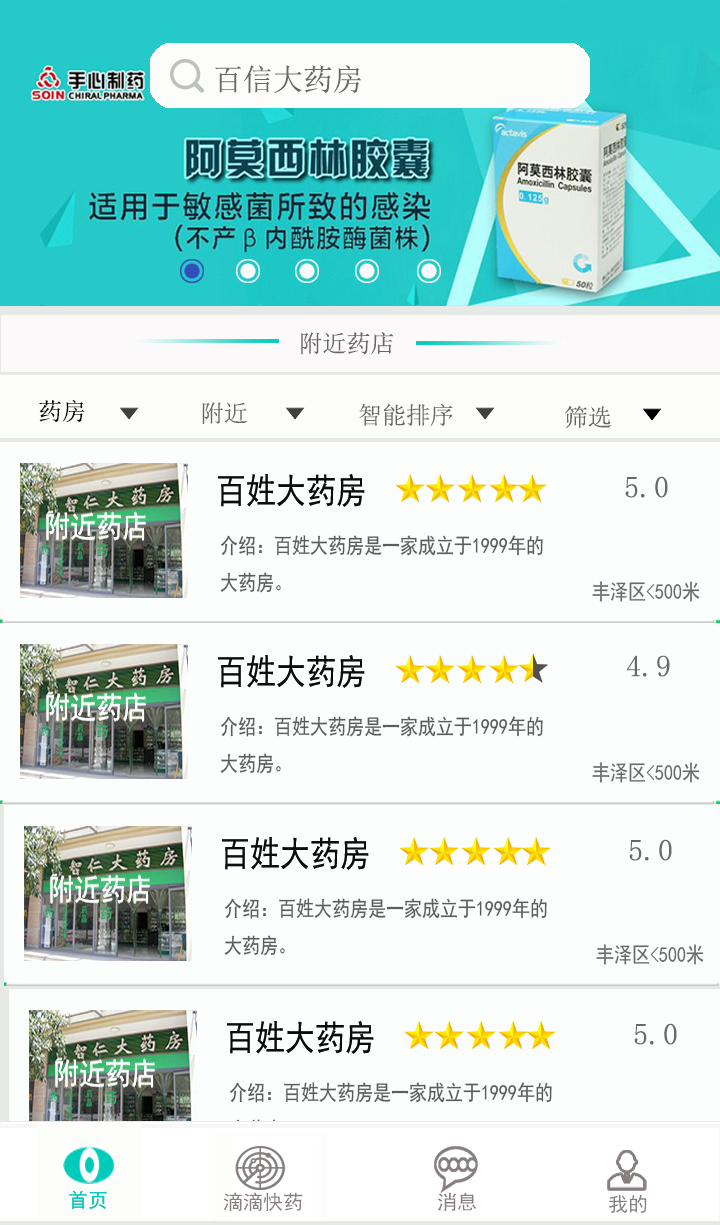
<style>
.page{position:relative;width:720px;height:1225px;background:#fbfefc}
.page>*{position:absolute;margin:0}
.t1{font:30px "SimSun";color:#686868}
.t2{font:24px "SimSun";color:#676666}
.t3{font:24px "SimSun";color:#050505}
.t4{font:24px "SimSun";color:#686867}
.t5{font:35.3px "SimHei";color:#0c0c0c;scale:0.85 1}
.t6{font:30px "SimSun";color:#686968}
.t7{font:21.2px "SimHei";color:#5b5c5c;scale:0.85 1}
.t8{font:21.2px "SimHei";color:#696b6a;scale:0.85 1}
</style>
<div class="page">
<p class="t1" style="left:215px;top:65px;width:146px;height:29px">百信大药房</p>
<p class="t2" style="left:301px;top:332px;width:93px;height:23px">附近药店</p>
<p class="t3" style="left:39px;top:399px;width:46px;height:24px">药房</p>
<p class="t4" style="left:202px;top:402px;width:46px;height:23px">附近</p>
<p class="t4" style="left:359px;top:403px;width:94px;height:23px">智能排序</p>
<p class="t4" style="left:565px;top:405px;width:47px;height:24px">筛选</p>
<p class="t5" style="left:218px;top:474px;width:147px;height:33px">百姓大药房</p>
<p class="t5" style="left:218px;top:474px;width:147px;height:33px">百姓大药房</p>
<p class="t6" style="left:625px;top:476px;width:43px;height:22px">5.0</p>
<p class="t7" style="left:220px;top:535px;width:323px;height:58px">介绍：百姓大药房是一家成立于1999年的<br>大药房。</p>
<p class="t8" style="left:592px;top:581px;width:108px;height:21px">丰泽区&lt;500米</p>
<p class="t5" style="left:218px;top:655px;width:147px;height:33px">百姓大药房</p>
<p class="t5" style="left:218px;top:655px;width:147px;height:33px">百姓大药房</p>
<p class="t6" style="left:627px;top:655px;width:43px;height:22px">4.9</p>
<p class="t7" style="left:220px;top:716px;width:323px;height:58px">介绍：百姓大药房是一家成立于1999年的<br>大药房。</p>
<p class="t8" style="left:592px;top:762px;width:108px;height:21px">丰泽区&lt;500米</p>
<p class="t5" style="left:222px;top:837px;width:147px;height:33px">百姓大药房</p>
<p class="t5" style="left:222px;top:837px;width:147px;height:33px">百姓大药房</p>
<p class="t6" style="left:629px;top:839px;width:43px;height:22px">5.0</p>
<p class="t7" style="left:224px;top:898px;width:323px;height:58px">介绍：百姓大药房是一家成立于1999年的<br>大药房。</p>
<p class="t8" style="left:596px;top:944px;width:108px;height:21px">丰泽区&lt;500米</p>
<p class="t5" style="left:227px;top:1021px;width:147px;height:33px">百姓大药房</p>
<p class="t5" style="left:227px;top:1021px;width:147px;height:33px">百姓大药房</p>
<p class="t6" style="left:634px;top:1023px;width:43px;height:22px">5.0</p>
<p class="t7" style="left:229px;top:1082px;width:323px;height:58px">介绍：百姓大药房是一家成立于1999年的<br>大药房。</p>
</div>
